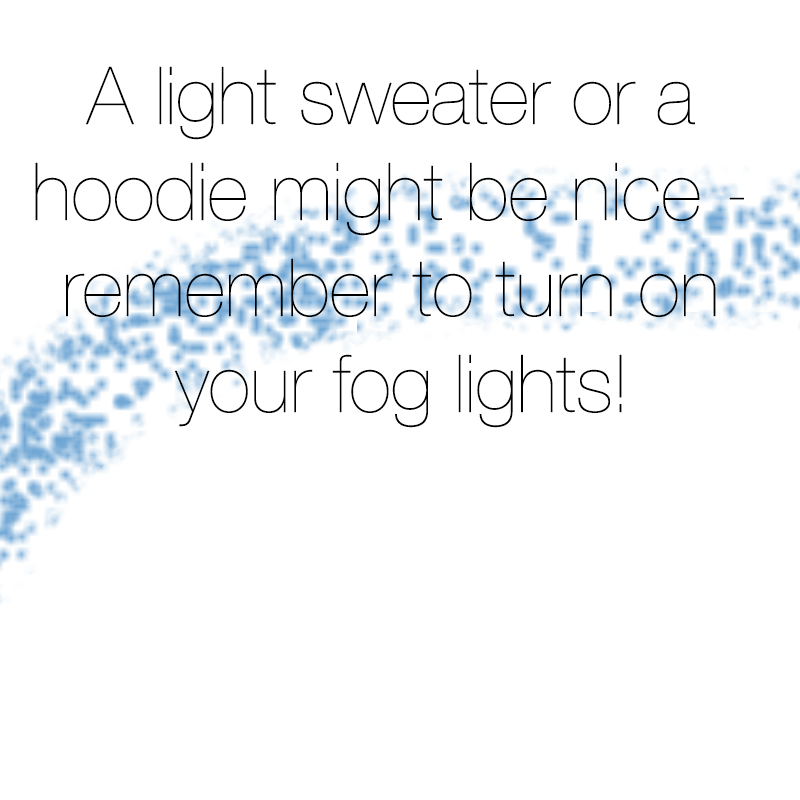
<style>
.page{position:relative;width:800px;height:800px;background:#ffffff}
.page>*{position:absolute;margin:0}
.t1{font:80px "HelveticaNeue-UltraLight";color:#000000}
</style>
<div class="page">
<p class="t1" style="left:35px;top:66px;width:709px;height:362px;text-align:center">A light sweater or a <br>hoodie might be nice - <br>remember to turn on <br>your fog lights!</p>
</div>
